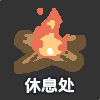
<style>
.page{position:relative;width:100px;height:100px;background:#333333}
.page>*{position:absolute;margin:0}
.t1{font:16.7px "DOUYINSANSBOLD-GB";letter-spacing:0.01em;color:#ffffff;text-transform:uppercase}
</style>
<div class="page">
<p class="t1" style="left:24px;top:77px;width:51px;height:16px">休息处</p>
</div>
